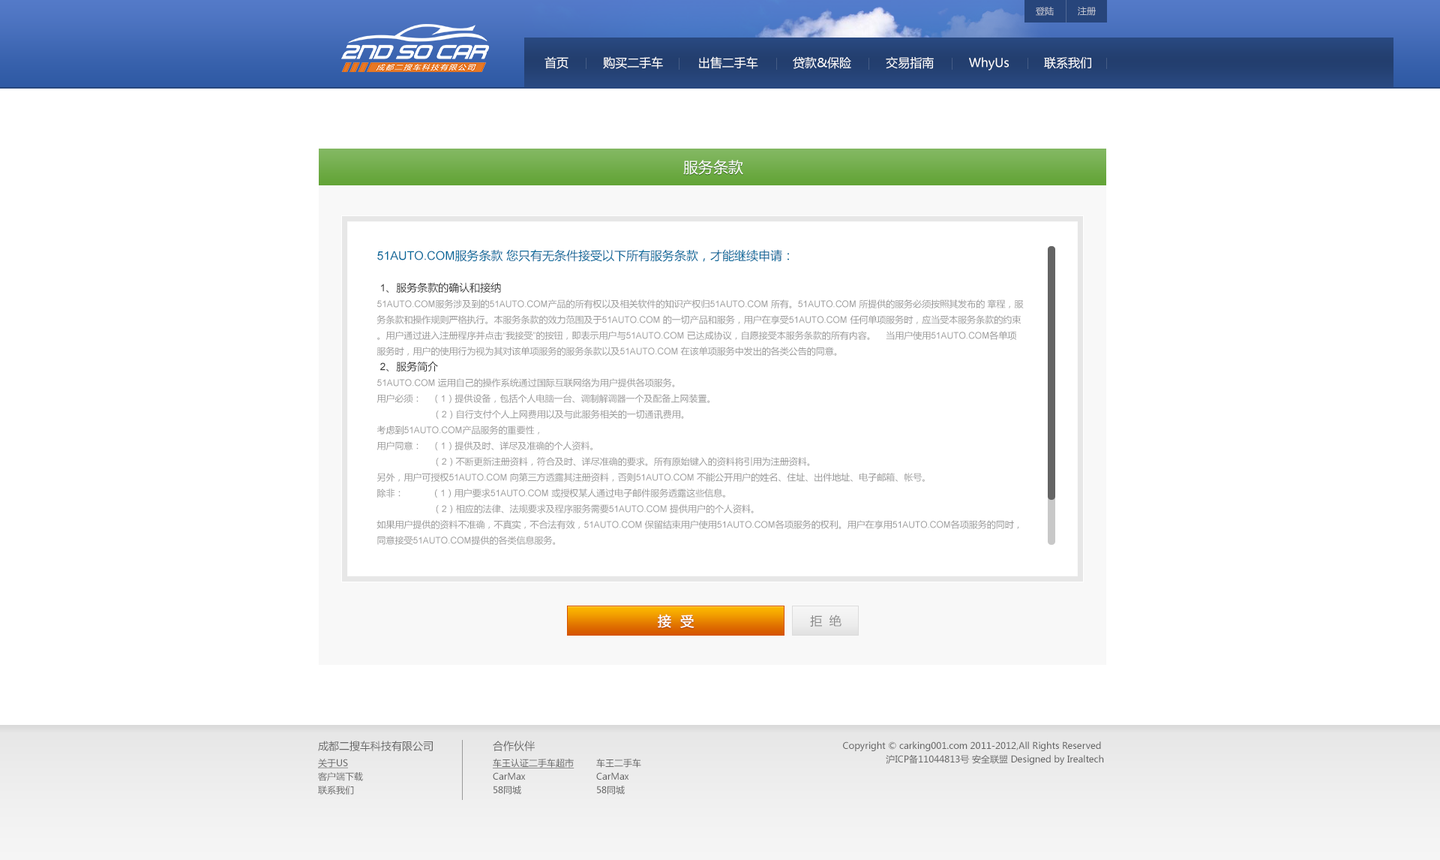
<style>
.page{position:relative;width:1440px;height:860px;background:#ffffff}
.page>*{position:absolute;margin:0}
.t1{font:9px "MicrosoftYaHei";color:#bdc3d1}
.t2{font:12px "MicrosoftYaHei";color:#ffffff}
.t3{font:15px "MicrosoftYaHei";color:#ffffff;text-transform:uppercase}
.t4{font:9px/15.8px "MicrosoftYaHei";color:#999999}
.t5{font:12px/15.8px "ArialMT";color:#006699}
.t6{font:12px/15.8px "MicrosoftYaHei";color:#006699}
.t7{font:10.5px/15.8px "ArialMT";color:#333333}
.t8{font:10.5px/15.8px "MicrosoftYaHei";color:#333333}
.t9{font:9px/15.8px "ArialMT";color:#999999}
.t10{font:13.5px "MicrosoftYaHei";color:#ffffff;text-transform:uppercase;font-weight:bold}
.t11{font:12px "MicrosoftYaHei";color:#888888;text-transform:uppercase}
.t12{font:10.5px "MicrosoftYaHei";color:#666666}
.t13{font:9px/13.5px "MicrosoftYaHei";color:#666666}
.t14{font:10.5px/18px "MicrosoftYaHei";color:#666666}
.t15{font:9px/13.5px "MicrosoftYaHei";color:#666666;text-decoration:underline}
</style>
<div class="page">
<p class="t1" style="left:1036px;top:7px;width:60px;height:9px">登陆         注册</p>
<p class="t2" style="left:544px;top:56px;width:547px;height:14px">首页 购买二手车 出售二手车 贷款&amp;保险 交易指南 WhyUs 联系我们</p>
<p class="t3" style="left:683px;top:160px;width:60px;height:15px">服务条款</p>
<p class="t4" style="left:376px;top:249px;width:648px;height:295px"><span class="t5">51AUTO.COM</span><span class="t6">服务条款 您只有无条件接受以下所有服务条款，才能继续申请： <br><br> </span><span class="t7">1</span><span class="t8">、服务条款的确认和接纳    <br></span><span class="t9">51AUTO.COM</span>服务涉及到的<span class="t9">51AUTO.COM</span>产品的所有权以及相关软件的知识产权归<span class="t9">51AUTO.COM </span>所有。<span class="t9">51AUTO.COM </span>所提供的服务必须按照其发布的 章程，服务条款和操作规则严格执行。本服务条款的效力范围及于<span class="t9">51AUTO.COM </span>的一切产品和服务，用户在享受<span class="t9">51AUTO.COM </span>任何单项服务时，应当受本服务条款的约束。用户通过进入注册程序并点击<span class="t9">“</span>我接受<span class="t9">”</span>的按钮，即表示用户与<span class="t9">51AUTO.COM </span>已达成协议，自愿接受本服务条款的所有内容。    当用户使用<span class="t9">51AUTO.COM</span>各单项服务时，用户的使用行为视为其对该单项服务的服务条款以及<span class="t9">51AUTO.COM </span>在该单项服务中发出的各类公告的同意。 <br> <span class="t7">2</span><span class="t8">、服务简介 　　<br></span><span class="t9">51AUTO.COM </span>运用自己的操作系统通过国际互联网络为用户提供各项服务。<br>用户必须：    （<span class="t9">1</span>）提供设备，包括个人电脑一台、调制解调器一个及配备上网装置。    <br>                     （<span class="t9">2</span>）自行支付个人上网费用以及与此服务相关的一切通讯费用。 　　<br>考虑到<span class="t9">51AUTO.COM</span>产品服务的重要性，<br>用户同意：    （<span class="t9">1</span>）提供及时、详尽及准确的个人资料。    <br>                     （<span class="t9">2</span>）不断更新注册资料，符合及时、详尽准确的要求。所有原始键入的资料将引用为注册资料。 　　<br>另外，用户可授权<span class="t9">51AUTO.COM </span>向第三方透露其注册资料，否则<span class="t9">51AUTO.COM </span>不能公开用户的姓名、住址、出件地址、电子邮箱、帐号。<br>除非：           （<span class="t9">1</span>）用户要求<span class="t9">51AUTO.COM </span>或授权某人通过电子邮件服务透露这些信息。    <br>                     （<span class="t9">2</span>）相应的法律、法规要求及程序服务需要<span class="t9">51AUTO.COM </span>提供用户的个人资料。 　　<br>如果用户提供的资料不准确，不真实，不合法有效，<span class="t9">51AUTO.COM </span>保留结束用户使用<span class="t9">51AUTO.COM</span>各项服务的权利。用户在享用<span class="t9">51AUTO.COM</span>各项服务的同时，同意接受<span class="t9">51AUTO.COM</span>提供的各类信息服务。</p>
<p class="t10" style="left:658px;top:614px;width:36px;height:14px">接  受</p>
<p class="t11" style="left:810px;top:614px;width:32px;height:12px">拒  绝</p>
<p class="t12" style="left:318px;top:740px;width:115px;height:11px">成都二搜车科技有限公司</p>
<p class="t13" style="left:493px;top:740px;width:81px;height:54px"><span class="t14">合作伙伴<br></span><span class="t15">车王认证二手车超市<br></span>CarMax<br>58同城</p>
<p class="t13" style="left:843px;top:741px;width:261px;height:23px;text-align:right">Copyright © carking001.com 2011-2012,All Rights Reserved <br>沪ICP备11044813号 安全联盟 Designed by Irealtech</p>
<p class="t13" style="left:318px;top:758px;width:45px;height:36px"><span class="t15">关于US<br></span>客户端下载<br>联系我们</p>
<p class="t13" style="left:596px;top:758px;width:45px;height:36px">车王二手车<br>CarMax<br>58同城</p>
</div>
